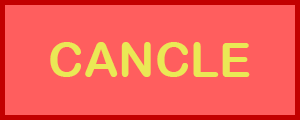
<style>
.page{position:relative;width:300px;height:120px;background:#ff5e5e}
.page>*{position:absolute;margin:0}
.t1{font:48px "ArialRoundedMTBold";color:#eae855}
</style>
<div class="page">
<p class="t1" style="left:50px;top:42px;width:200px;height:35px">CANCLE</p>
</div>
